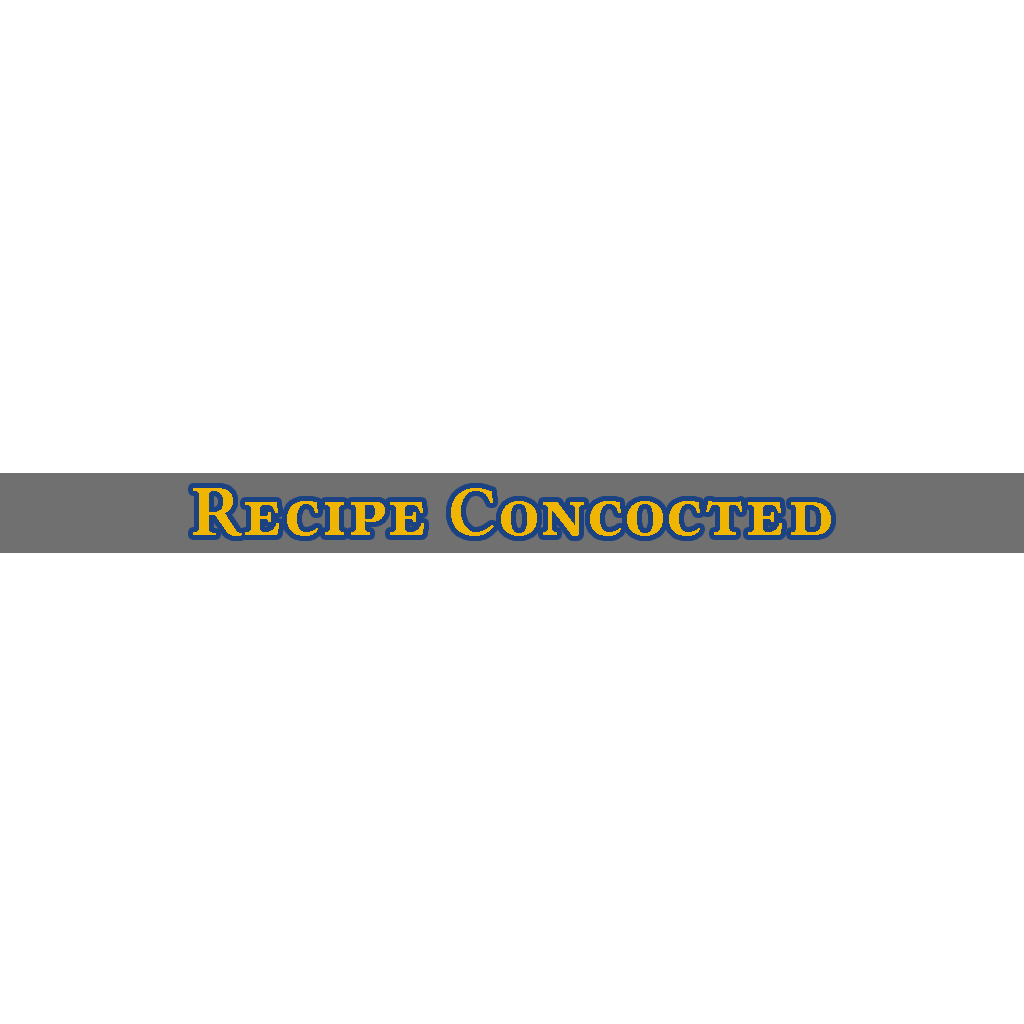
<style>
.page{position:relative;width:1024px;height:1024px;background:#ffffff}
.page>*{position:absolute;margin:0}
.t1{font:71.1px "LinLibertineB";color:#f0b501;font-variant:small-caps}
</style>
<div class="page">
<p class="t1" style="left:193px;top:488px;width:638px;height:48px">Recipe Concocted</p>
</div>
